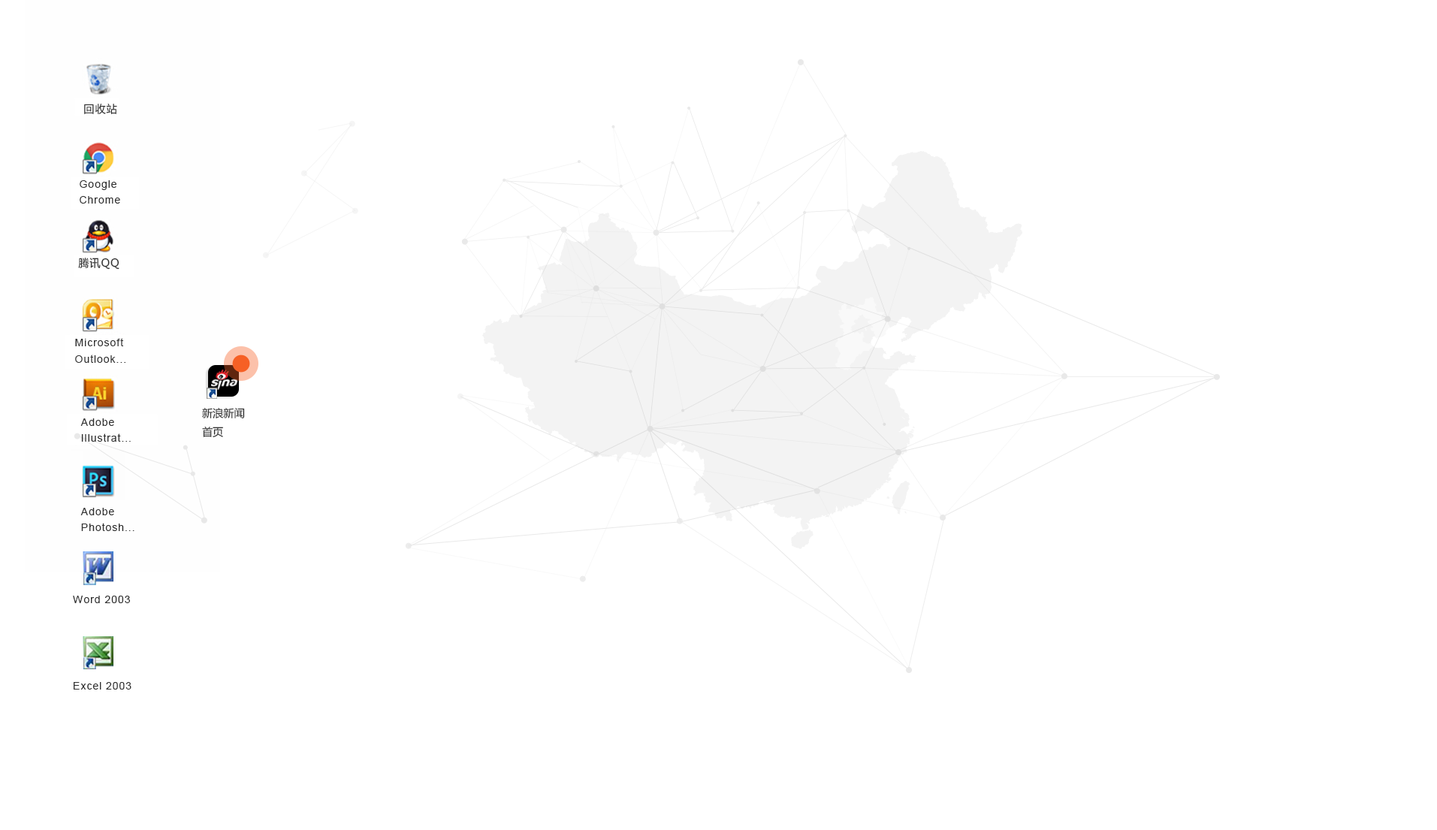
<style>
.page{position:relative;width:1437px;height:830px;background:#ffffff}
.page>*{position:absolute;margin:0}
.t1{font:10.7px "MicrosoftYaHei";letter-spacing:0.06em;color:#303030}
.t2{font:10.7px/16px "ArialMT";letter-spacing:0.06em;color:#303030}
.t3{font:10.7px/18.8px "MicrosoftYaHei";color:#303030}
.t4{font:10.7px "ArialMT";letter-spacing:0.06em;color:#303030}
</style>
<div class="page">
<p class="t1" style="left:84px;top:104px;width:33px;height:10px">回收站</p>
<p class="t2" style="left:80px;top:180px;width:40px;height:24px">Google<br>Chrome</p>
<p class="t1" style="left:78px;top:258px;width:41px;height:12px">腾讯QQ</p>
<p class="t2" style="left:75px;top:338px;width:50px;height:25px">Microsoft<br>Outlook...</p>
<p class="t3" style="left:202px;top:408px;width:43px;height:30px">新浪新闻<br>首页</p>
<p class="t2" style="left:80px;top:418px;width:51px;height:24px">Adobe<br>Illustrat...</p>
<p class="t2" style="left:80px;top:508px;width:54px;height:23px">Adobe<br>Photosh...</p>
<p class="t4" style="left:73px;top:596px;width:57px;height:7px">Word 2003</p>
<p class="t4" style="left:74px;top:682px;width:57px;height:7px">Excel 2003</p>
</div>
